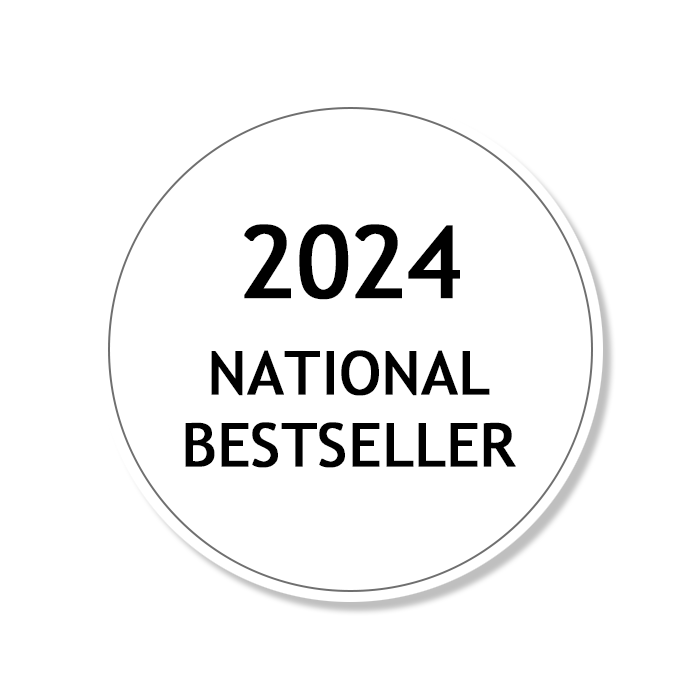
<style>
.page{position:relative;width:700px;height:700px;background:#ffffff}
.page>*{position:absolute;margin:0}
.t1{font:100px "TrebuchetMS";color:#000000;font-weight:bold}
.t2{font:60px "TrebuchetMS";color:#000000;font-weight:bold}
</style>
<div class="page">
<p class="t1" style="left:244px;top:224px;width:216px;height:76px">2024</p>
<p class="t2" style="left:185px;top:350px;width:331px;height:118px;text-align:center">NATIONAL<br>BESTSELLER</p>
</div>
